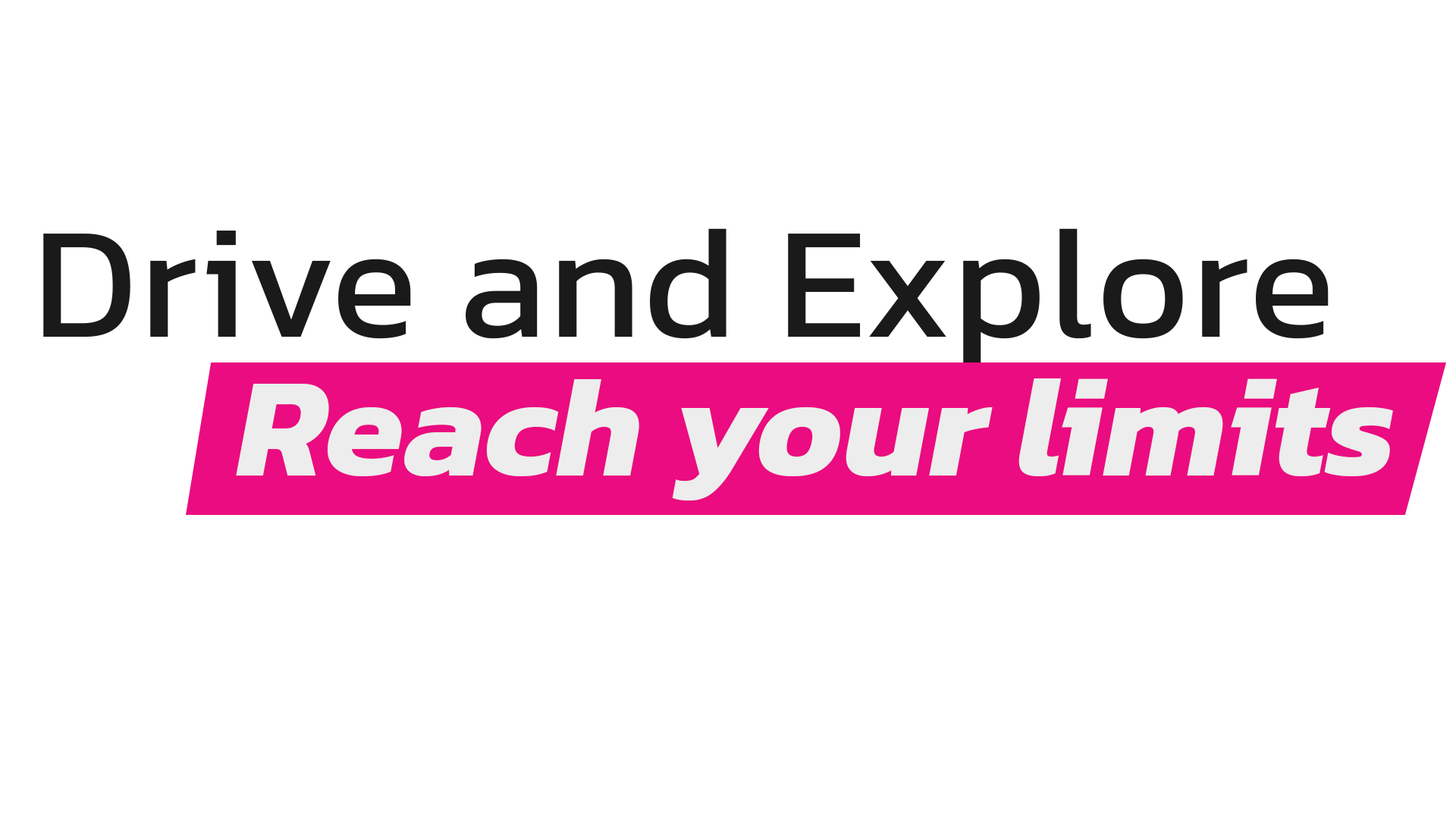
<style>
.page{position:relative;width:1456px;height:819px;background:#ffffff}
.page>*{position:absolute;margin:0}
.t1{font:160.4px "Kanit-Regular";letter-spacing:0.015em;color:#1a1a1a}
.t2{font:145px "Kanit-Bold";color:#ededed}
</style>
<div class="page">
<p class="t1" style="left:43px;top:228px;width:1286px;height:144px">Drive and Explore</p>
<p class="t2" style="left:236px;top:378px;width:1157px;height:122px">Reach your limits</p>
</div>
